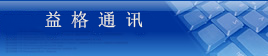
<style>
.page{position:relative;width:268px;height:56px}
.page>*{position:absolute;margin:0}
.t1{font:18px "SimSun";color:#f2f3e7}
</style>
<div class="page">
<p class="t1" style="left:45px;top:11px;width:98px;height:17px">益 格 通 讯</p>
</div>
